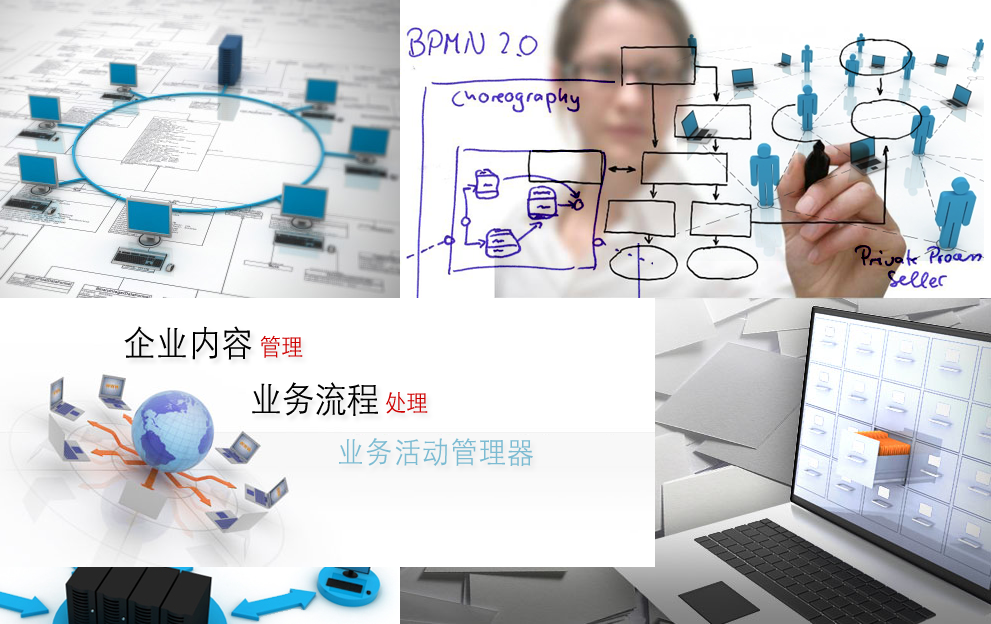
<style>
.page{position:relative;width:991px;height:624px}
.page>*{position:absolute;margin:0}
.t1{font:36px "STXihei";letter-spacing:0.01em;color:#000000;scale:0.9 1}
.t2{font:24px "STXihei";letter-spacing:0.01em;color:#ce0000;scale:0.9 1}
.t3{font:36px "STXihei";color:#000000;scale:0.9 1}
.t4{font:24px "STXihei";color:#ce0000;scale:0.9 1}
.t5{font:30px "STXihei";letter-spacing:0.05em;color:#7cbbd2;scale:0.9 1}
</style>
<div class="page">
<p class="t1" style="left:124px;top:326px;width:179px;height:34px">企业内容 <span class="t2">管理</span></p>
<p class="t3" style="left:252px;top:382px;width:176px;height:34px">业务流程 <span class="t4">处理</span></p>
<p class="t5" style="left:339px;top:438px;width:194px;height:28px">业务活动管理器</p>
</div>
